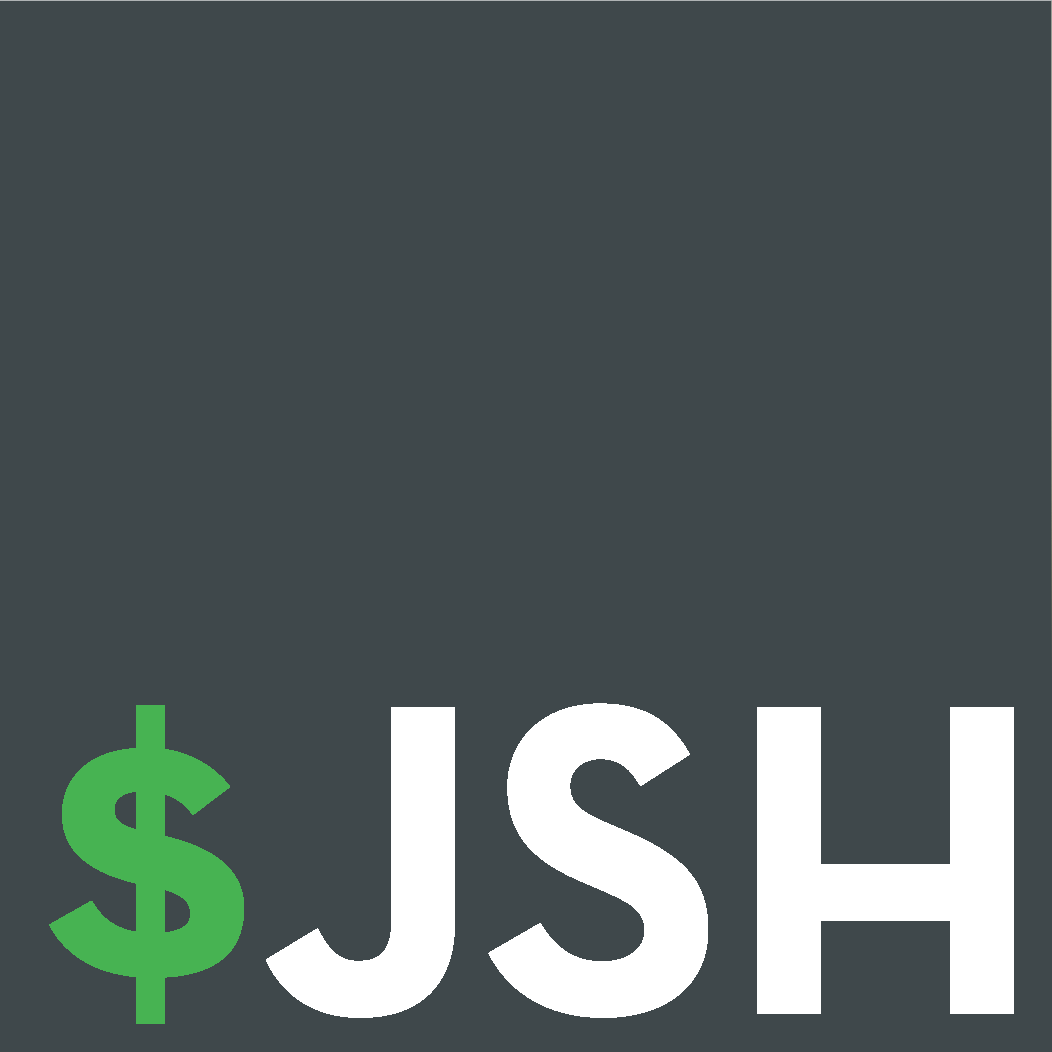
<style>
.page{position:relative;width:1052px;height:1052px;background:#3f484b}
.page>*{position:absolute;margin:0}
.t1{font:425px "NeutraText-Bold";color:#47b352}
.t2{font:450px "NeutraText-Bold";color:#ffffff}
</style>
<div class="page">
<p class="t1" style="left:49px;top:705px;width:195px;height:319px">$</p>
<p class="t2" style="left:266px;top:703px;width:748px;height:315px">JSH</p>
</div>
